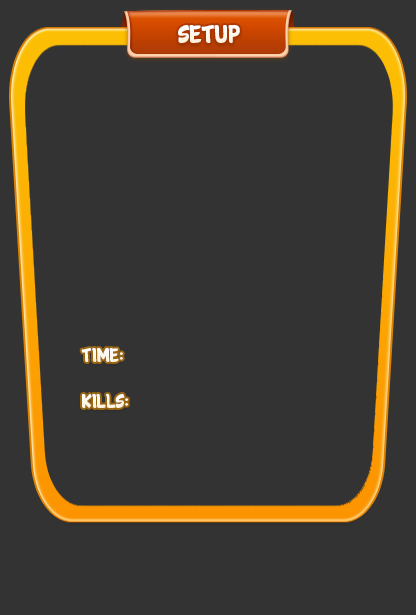
<style>
.page{position:relative;width:416px;height:615px;background:#333333}
.page>*{position:absolute;margin:0}
.t1{font:26px "Cartwheel";color:#ffffff}
.t2{font:20px "Cartwheel";color:#ffffff}
.t3{font:20px "Cartwheel";color:#fdf8ec}
</style>
<div class="page">
<p class="t1" style="left:178px;top:25px;width:62px;height:18px">SETUP</p>
<p class="t2" style="left:81px;top:348px;width:42px;height:14px">time:</p>
<p class="t3" style="left:81px;top:394px;width:47px;height:14px">Kills:</p>
</div>
